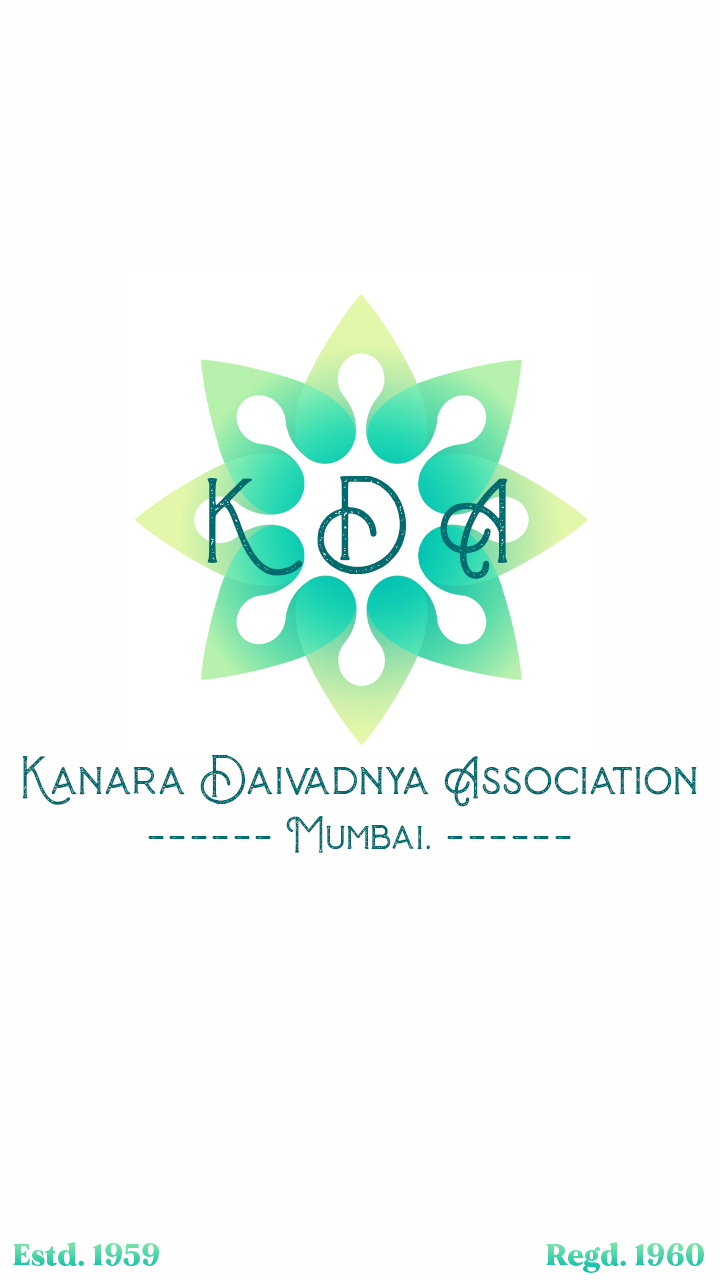
<style>
.page{position:relative;width:720px;height:1280px;background:#fffefe}
.page>*{position:absolute;margin:0}
.t1{font:140px "BaroneysTextured";letter-spacing:0.025em;color:#006b6e}
.t2{font:70px "BaroneysTextured";letter-spacing:0.025em;color:#006b6e}
.t3{font:60px "BaroneysTextured";letter-spacing:0.025em;color:#006b6e}
.t4{font:30px "MADEMirage-Black";letter-spacing:0.025em}
</style>
<div class="page">
<p class="t1" style="left:207px;top:476px;width:301px;height:103px">K  D A</p>
<p class="t2" style="left:22px;top:755px;width:675px;height:52px">Kanara Daivadnya Association</p>
<p class="t3" style="left:148px;top:816px;width:423px;height:37px">------ Mumbai. ------</p>
<p class="t4" style="left:13px;top:1242px;width:691px;height:31px">Estd. 1959                                                         Regd. 1960</p>
</div>
